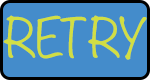
<style>
.page{position:relative;width:150px;height:80px;background:#448ccb}
.page>*{position:absolute;margin:0}
.t1{font:48px "Noteworthy-Light";color:#d1de44}
</style>
<div class="page">
<p class="t1" style="left:3px;top:15px;width:144px;height:45px">RETRY</p>
</div>
